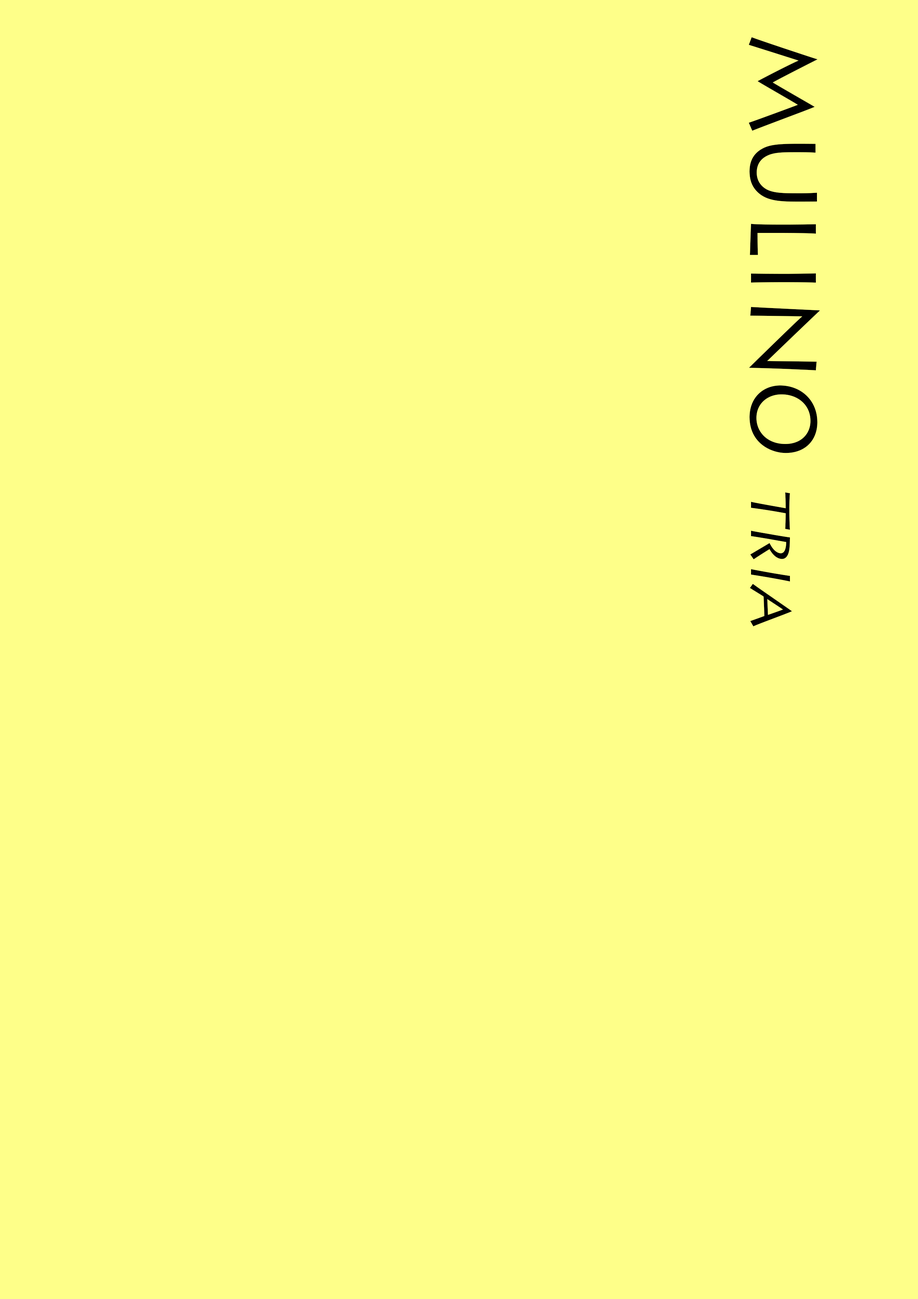
<style>
.page{position:relative;width:918px;height:1299px;background:#feff89}
.page>*{position:absolute;margin:0}
.t1{font:92.6px "LithosPro-Regular";color:#000000}
.t2{font:55.5px "LithosPro-Regular";color:#000000;font-style:italic}
</style>
<div class="page">
<p class="t1" style="left:749px;top:37px;width:71px;height:589px;rotate:90deg">MULINO <span class="t2">TRIA</span></p>
</div>
